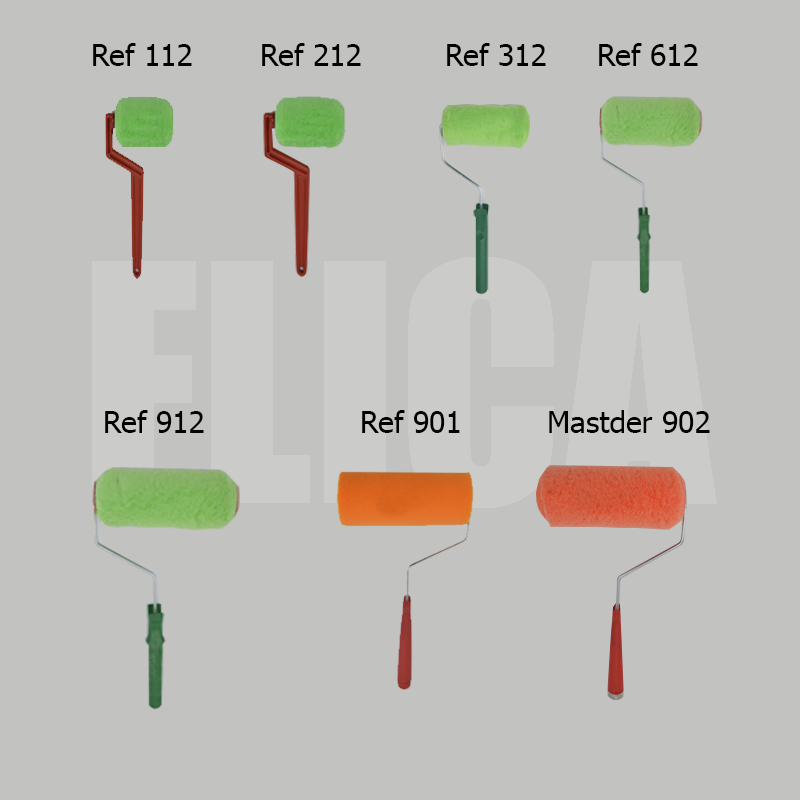
<style>
.page{position:relative;width:800px;height:800px;background:#c2c2c1}
.page>*{position:absolute;margin:0}
.t1{font:30px "Tahoma";color:#020202}
</style>
<div class="page">
<p class="t1" style="left:93px;top:43px;width:99px;height:23px">Ref 112</p>
<p class="t1" style="left:262px;top:43px;width:99px;height:23px">Ref 212</p>
<p class="t1" style="left:447px;top:43px;width:99px;height:23px">Ref 312</p>
<p class="t1" style="left:599px;top:43px;width:99px;height:23px">Ref 612</p>
<p class="t1" style="left:105px;top:410px;width:99px;height:23px">Ref 912</p>
<p class="t1" style="left:362px;top:410px;width:98px;height:23px">Ref 901</p>
<p class="t1" style="left:549px;top:410px;width:161px;height:23px">Mastder 902</p>
</div>
